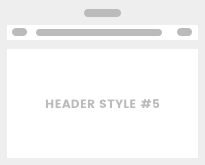
<style>
.page{position:relative;width:205px;height:165px;background:#ffffff}
.page>*{position:absolute;margin:0}
.t1{font:12px "Poppins";letter-spacing:0.025em;color:#bbbbbb;text-transform:uppercase}
</style>
<div class="page">
<p class="t1" style="left:45px;top:99px;width:115px;height:9px">Header Style #5</p>
</div>
